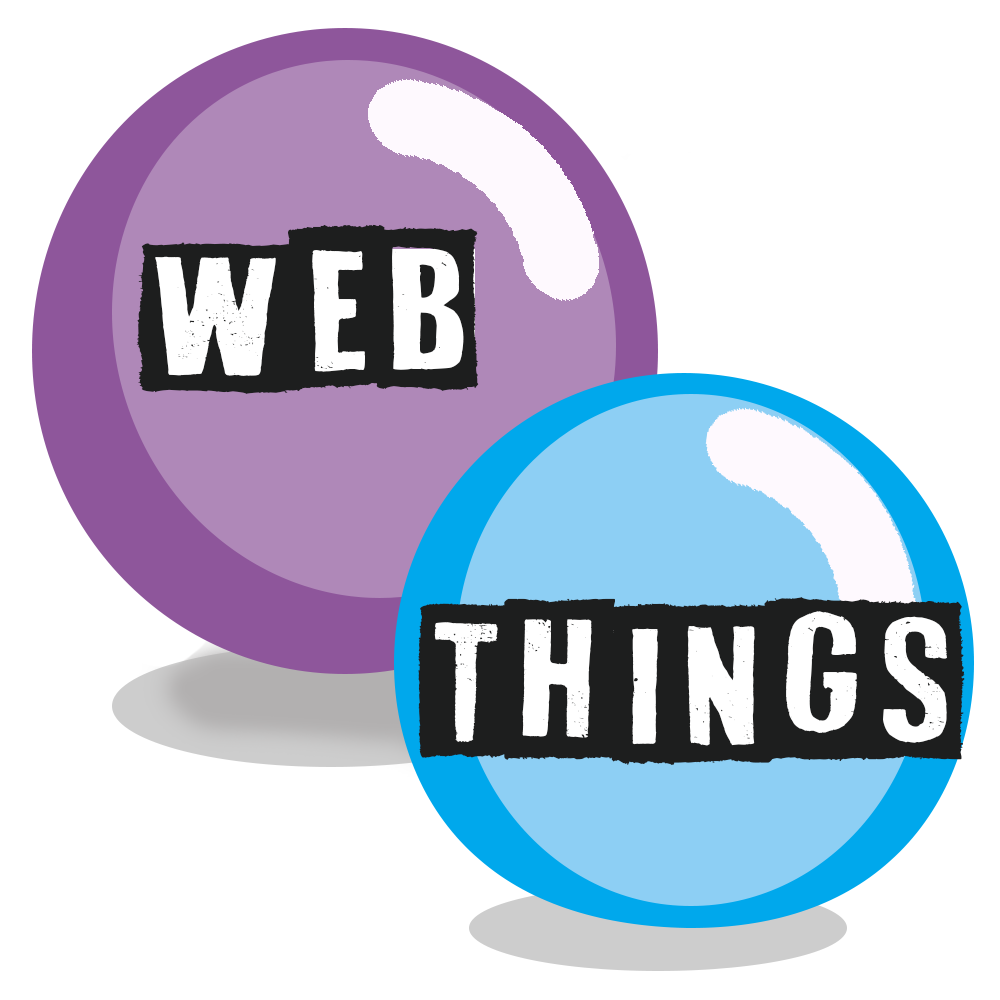
<style>
.page{position:relative;width:1000px;height:1000px;background:#ffffff}
.page>*{position:absolute;margin:0}
.t1{font:153.9px "WhiteOnBlack";color:#1d1e1e}
.t2{font:153.6px "WhiteOnBlack";color:#1d1e1e}
</style>
<div class="page">
<p class="t1" style="left:136px;top:224px;width:343px;height:170px">web</p>
<p class="t2" style="left:418px;top:596px;width:547px;height:169px">Things</p>
</div>
